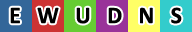
<style>
.page{position:relative;width:192px;height:32px}
.page>*{position:absolute;margin:0}
.t1{font:24px "Calibri-Bold";color:#000000}
</style>
<div class="page">
<p class="t1" style="left:10px;top:7px;width:172px;height:17px">E   W   U   D   N   S</p>
</div>
